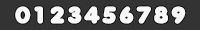
<style>
.page{position:relative;width:200px;height:30px;background:#333333}
.page>*{position:absolute;margin:0}
.t1{font:23px "Debussy";letter-spacing:0.075em;color:#f8f8f8}
</style>
<div class="page">
<p class="t1" style="left:15px;top:6px;width:171px;height:18px">0123456789</p>
</div>
